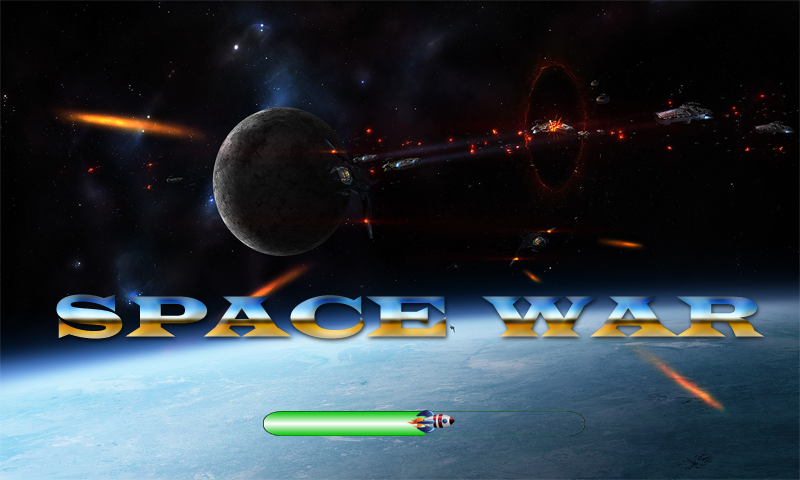
<style>
.page{position:relative;width:800px;height:480px}
.page>*{position:absolute;margin:0}
.t1{font:60px "LatinWide"}
</style>
<div class="page">
<p class="t1" style="left:56px;top:294px;width:708px;height:45px">SPACE  WAR</p>
</div>
